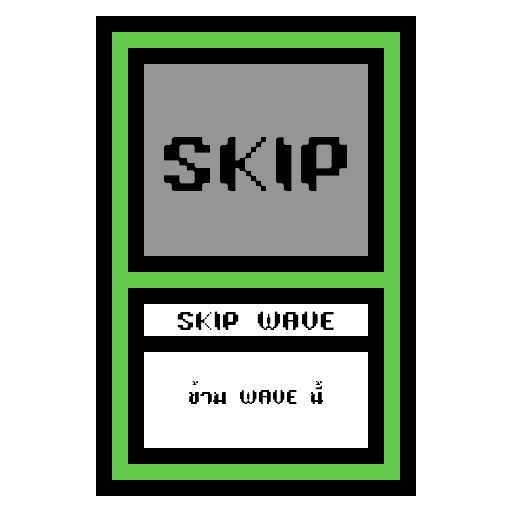
<style>
.page{position:relative;width:512px;height:512px;background:#ffffff}
.page>*{position:absolute;margin:0}
.t1{font:72px "TA16BIT-Regular";color:#000000}
.t2{font:24px "TA16BIT-Regular";color:#000000}
.t3{font:18px "TA16BIT-Regular";color:#000000}
</style>
<div class="page">
<p class="t1" style="left:164px;top:137px;width:183px;height:54px">SKIP</p>
<p class="t2" style="left:177px;top:311px;width:157px;height:19px">SKIP WAVE</p>
<p class="t3" style="left:189px;top:381px;width:134px;height:23px">ข้าม WAVE นี้</p>
</div>
